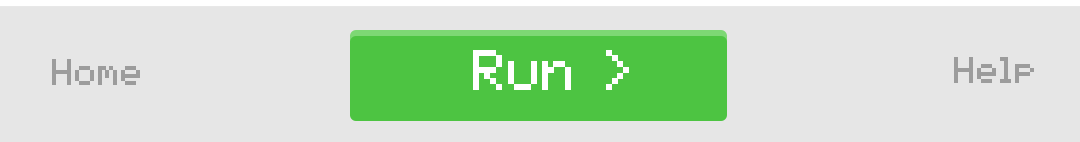
<style>
.page{position:relative;width:1080px;height:142px;background:#e6e6e6}
.page>*{position:absolute;margin:0}
.t1{font:46px "pixelmix";color:#ffffff}
.t2{font:30px "pixelmix";color:#9c9c9c}
</style>
<div class="page">
<p class="t1" style="left:473px;top:50px;width:156px;height:40px">Run &gt;</p>
<p class="t2" style="left:52px;top:59px;width:88px;height:26px">Home</p>
<p class="t2" style="left:954px;top:57px;width:80px;height:26px">Help</p>
</div>
